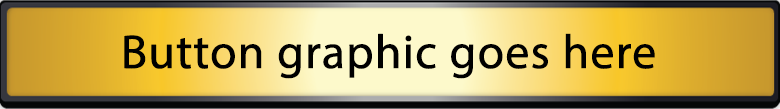
<style>
.page{position:relative;width:780px;height:109px}
.page>*{position:absolute;margin:0}
.t1{font:48px "MyriadPro-Regular";color:#000000;font-weight:bold}
</style>
<div class="page">
<p class="t1" style="left:124px;top:33px;width:531px;height:46px">Button graphic goes here</p>
</div>
